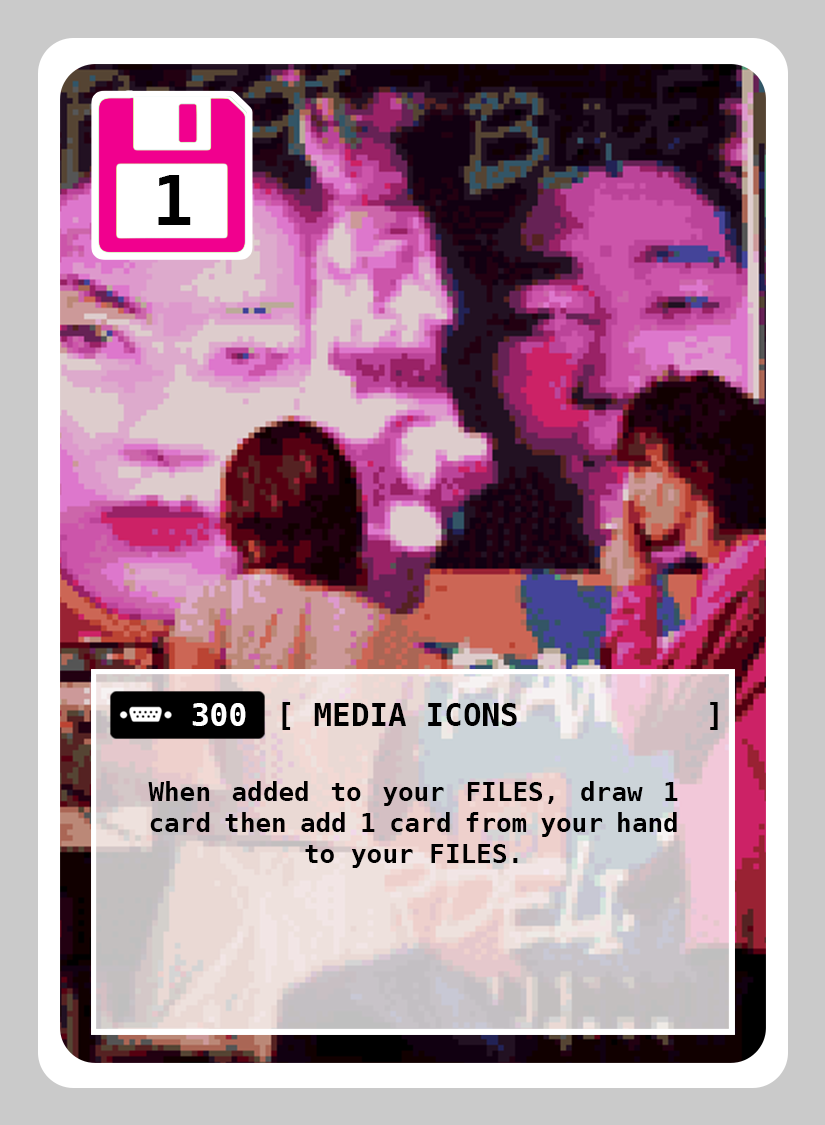
<style>
.page{position:relative;width:825px;height:1125px}
.page>*{position:absolute;margin:0}
.t1{font:69px "DejaVuSansMono-Bold";color:#000000}
.t2{font:31px "DejaVuSansMono-Bold";color:#ffffff}
.t3{font:31px "DejaVuSansMono-Bold";color:#000000}
.t4{font:26px "DejaVuSansMono-Bold";color:#000000}
</style>
<div class="page">
<p class="t1" style="left:158px;top:175px;width:33px;height:50px">1</p>
<p class="t2" style="left:192px;top:703px;width:54px;height:23px">300</p>
<p class="t3" style="left:314px;top:703px;width:203px;height:23px">MEDIA ICONS</p>
<p class="t4" style="left:148px;top:781px;width:530px;height:87px;text-align:justify">When added to your FILES, draw 1 card then add 1 card from your hand to your FILES.</p>
</div>
